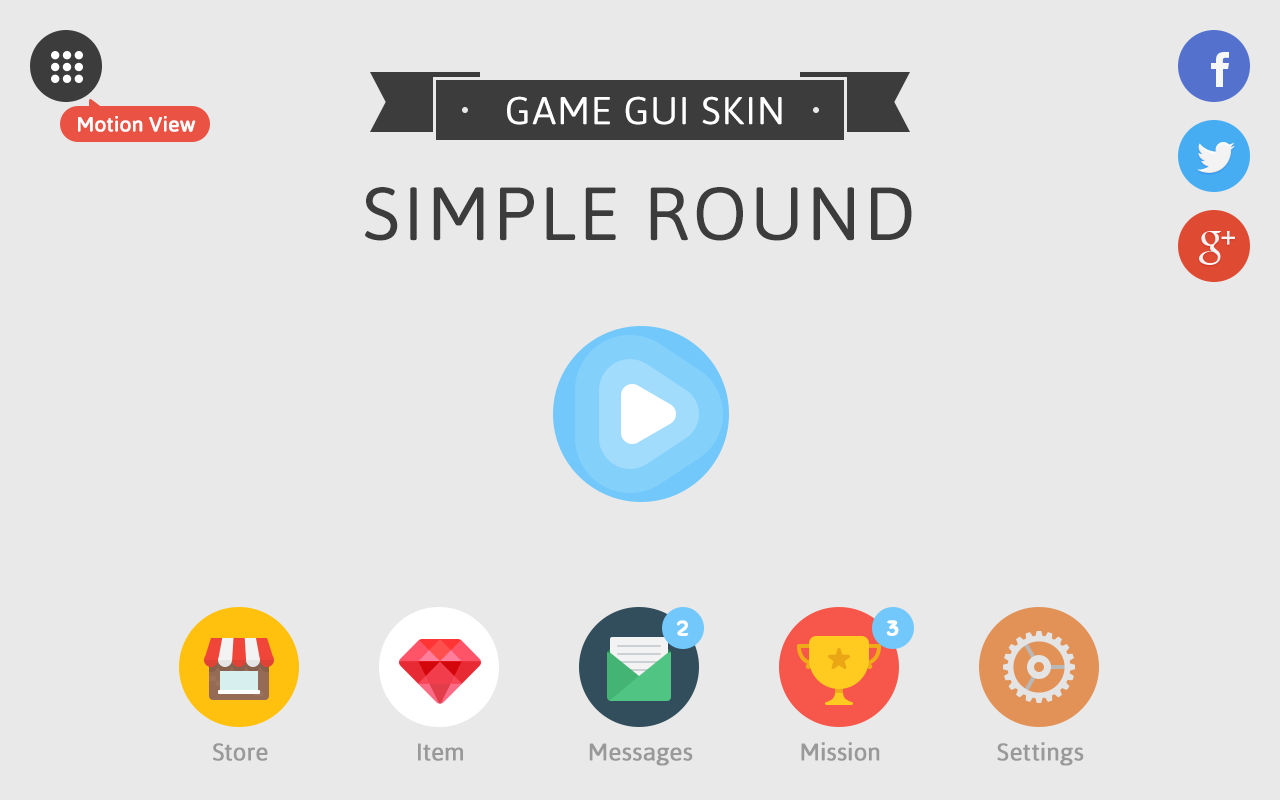
<style>
.page{position:relative;width:1280px;height:800px;background:#e9e9e9}
.page>*{position:absolute;margin:0}
.t1{font:39px "Asap-Regular";letter-spacing:0.03em;color:#ffffff;text-transform:uppercase}
.t2{font:20px "Asap-Regular";letter-spacing:-0.01em;color:#ffffff;font-weight:bold;scale:1.05 1}
.t3{font:75px "Asap-Regular";letter-spacing:0.04em;color:#3c3c3c;text-transform:uppercase}
.t4{font:20.9px "Sniglet-Regular";letter-spacing:0.04em;color:#ffffff;font-weight:bold;scale:1.05 1}
.t5{font:24px "Asap-Regular";letter-spacing:-0.01em;color:#999999;font-weight:bold}
</style>
<div class="page">
<p class="t1" style="left:507px;top:96px;width:275px;height:29px">Game gui skin</p>
<p class="t2" style="left:78px;top:116px;width:118px;height:16px">Motion View</p>
<p class="t3" style="left:365px;top:187px;width:547px;height:54px">Simple Round</p>
<p class="t4" style="left:677px;top:620px;width:12px;height:16px">2</p>
<p class="t4" style="left:886px;top:620px;width:13px;height:16px">3</p>
<p class="t5" style="left:213px;top:743px;width:55px;height:18px">Store</p>
<p class="t5" style="left:418px;top:743px;width:45px;height:18px">Item</p>
<p class="t5" style="left:589px;top:743px;width:104px;height:23px">Messages</p>
<p class="t5" style="left:801px;top:742px;width:79px;height:19px">Mission</p>
<p class="t5" style="left:997px;top:742px;width:87px;height:24px">Settings</p>
</div>
